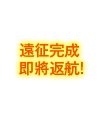
<style>
.page{position:relative;width:100px;height:116px;background:#ffffff}
.page>*{position:absolute;margin:0}
.t1{font:15px/18px "GothicMB101Pr6N-Medium";color:#e85700}
</style>
<div class="page">
<p class="t1" style="left:19px;top:43px;width:64px;height:33px">遠征完成<br>即將返航!</p>
</div>
